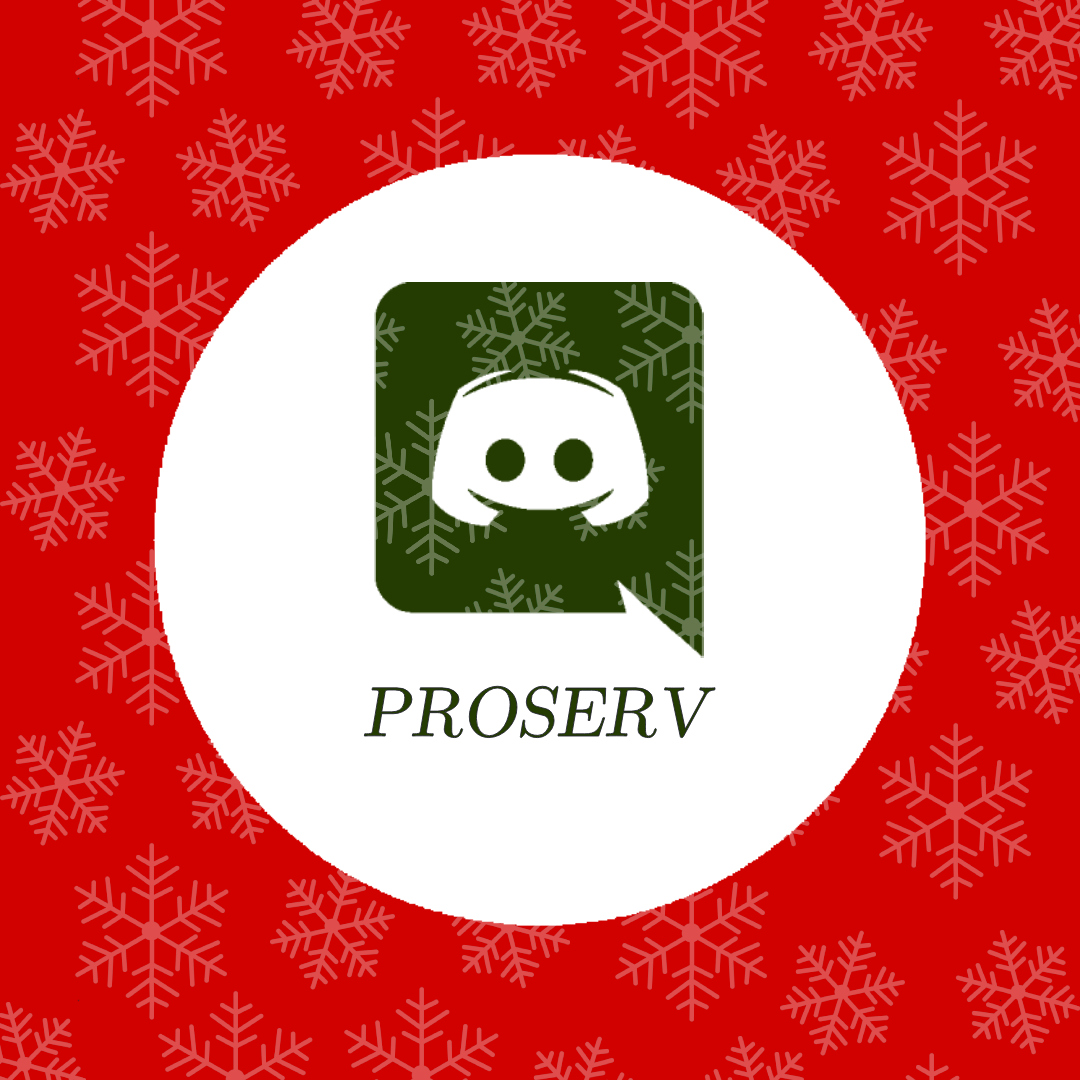
<style>
.page{position:relative;width:1080px;height:1080px;background:#d10100}
.page>*{position:absolute;margin:0}
.t1{font:80.3px "TibetanSambhotaYigchung";color:#243c02}
</style>
<div class="page">
<p class="t1" style="left:363px;top:685px;width:354px;height:54px">PROSERV</p>
</div>
